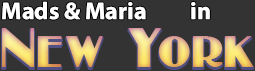
<style>
.page{position:relative;width:255px;height:71px;background:#333333}
.page>*{position:absolute;margin:0}
.t1{font:24px "MyriadConceptRoman-Bold";color:#ffffff}
.t2{font:48px "Broadbay-Normal"}
</style>
<div class="page">
<p class="t1" style="left:2px;top:1px;width:144px;height:19px">Mads &amp; Maria</p>
<p class="t1" style="left:191px;top:2px;width:19px;height:18px">in</p>
<p class="t2" style="left:2px;top:28px;width:252px;height:39px">New York</p>
</div>
